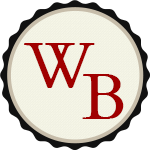
<style>
.page{position:relative;width:150px;height:150px;background:#ffffff}
.page>*{position:absolute;margin:0}
.t1{font:67px "ETBembo-RomanLF";color:#a00000}
.t2{font:69px "ETBembo-RomanLF";color:#a00000}
</style>
<div class="page">
<p class="t1" style="left:24px;top:43px;width:71px;height:45px">W</p>
<p class="t2" style="left:82px;top:74px;width:42px;height:45px">B</p>
</div>
